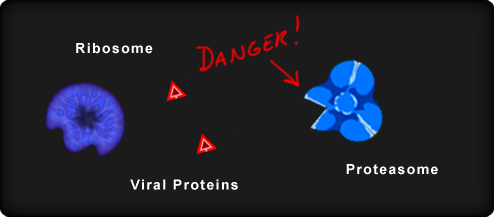
<style>
.page{position:relative;width:494px;height:217px;background:#1b1b1b}
.page>*{position:absolute;margin:0}
.t1{font:14px "Arial-BoldMT";letter-spacing:0.1em;color:#ffffff}
</style>
<div class="page">
<p class="t1" style="left:76px;top:43px;width:77px;height:11px">Ribosome</p>
<p class="t1" style="left:346px;top:164px;width:92px;height:11px">Proteasome</p>
<p class="t1" style="left:130px;top:179px;width:108px;height:11px">Viral Proteins</p>
</div>
